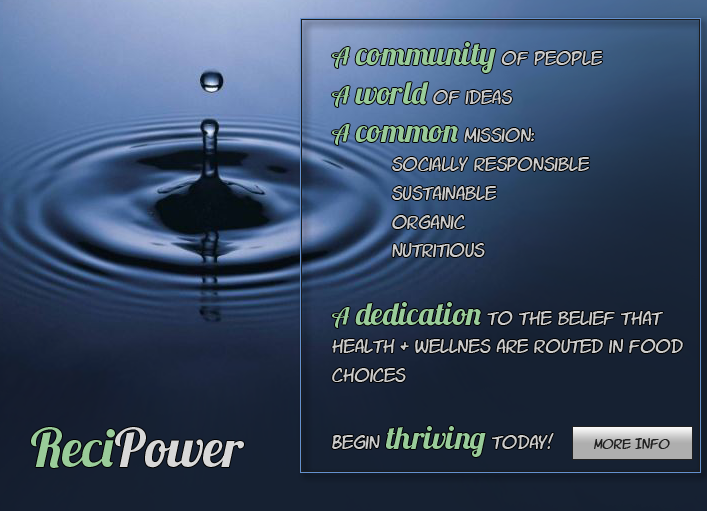
<style>
.page{position:relative;width:707px;height:511px}
.page>*{position:absolute;margin:0}
.t1{font:24px "VTCLettererPro";color:#cbcbcb}
.t2{font:24px "Lobster1.3";color:#99cc99}
.t3{font:32px "Lobster1.3";color:#99cc99}
</style>
<div class="page">
<p class="t1" style="left:332px;top:42px;width:351px;height:415px"><span class="t2">A </span><span class="t3">community </span>of people<br><span class="t2">A </span><span class="t3">world </span>of ideas<br><span class="t2">A </span><span class="t3">common</span> mission:<br>     socially responsible<br>     sustainable<br>     organic<br>     nutritious<br><br><span class="t2">A </span><span class="t3">dedication</span> to the belief that health &amp; wellnes are routed in food choices<br><br>Begin <span class="t3">thriving</span> today!</p>
</div>
